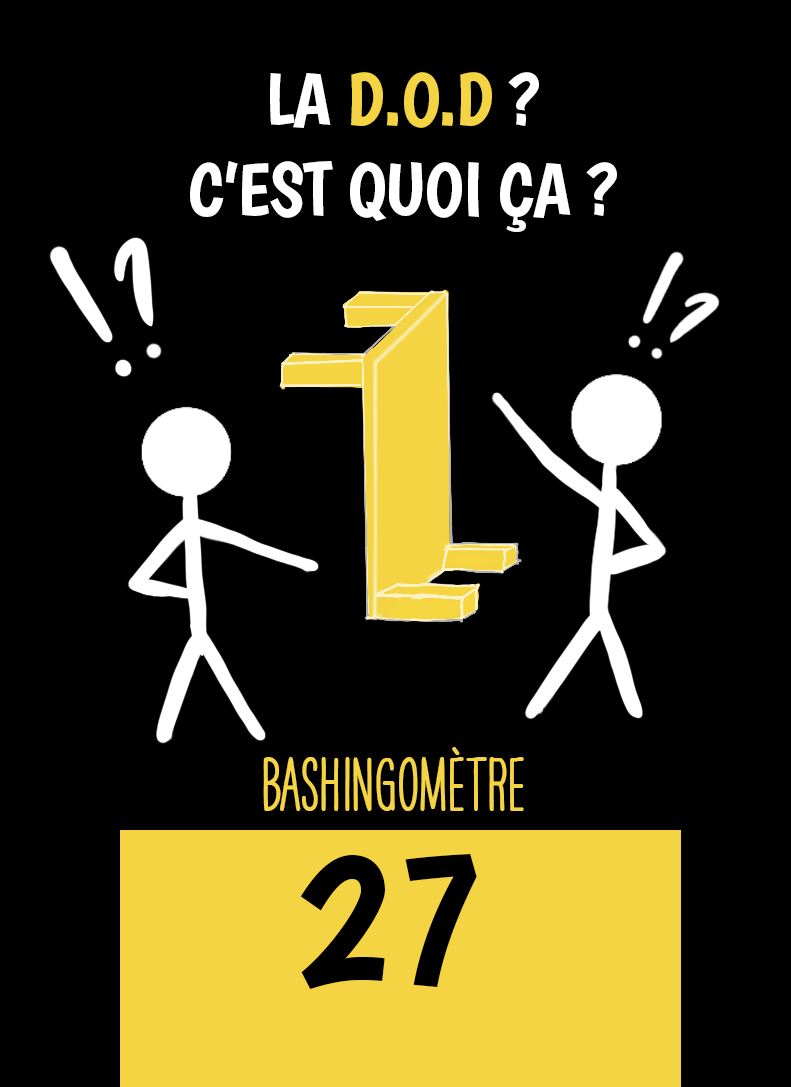
<style>
.page{position:relative;width:791px;height:1087px;background:#000000}
.page>*{position:absolute;margin:0}
.t1{font:75px "Boogaloo-Regular";letter-spacing:-0.02em;color:#ffffff}
.t2{font:75px "Boogaloo-Regular";letter-spacing:-0.02em;color:#f4d443}
.t3{font:66.7px "HAVEANICEDAYTallW04-Bold";color:#f4d443}
.t4{font:200px "Boogaloo-Regular";color:#000000}
</style>
<div class="page">
<p class="t1" style="left:190px;top:72px;width:427px;height:160px;text-align:center">LA <span class="t2">D.O.D</span> ?<br>C’EST QUOI ÇA ?</p>
<p class="t3" style="left:263px;top:747px;width:261px;height:64px">BASHINgomètre</p>
<p class="t4" style="left:300px;top:854px;width:177px;height:135px">27</p>
</div>
